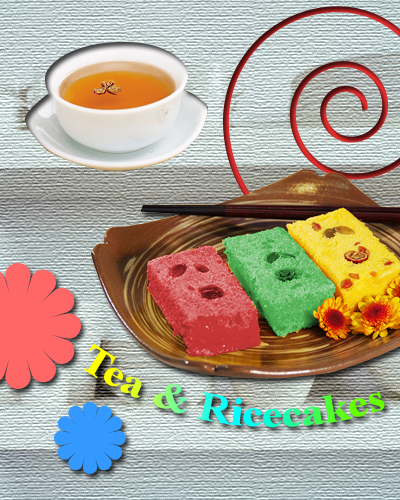
<style>
.page{position:relative;width:400px;height:500px}
.page>*{position:absolute;margin:0}
.t1{font:40px "TimesNewRomanPS-BoldMT"}
</style>
<div class="page">
<p class="t1" style="left:83px;top:343px;width:302px;height:85px;rotate:8deg">Tea &amp; Ricecakes</p>
</div>
